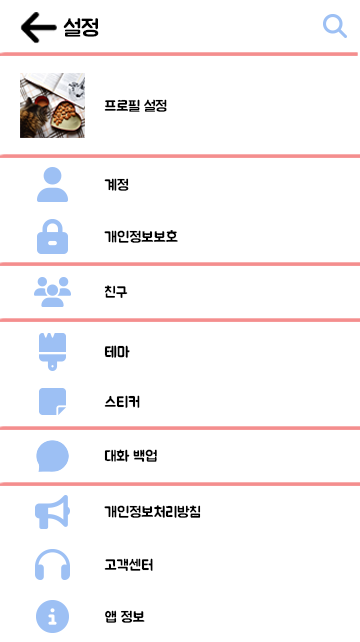
<style>
.page{position:relative;width:360px;height:642px;background:#ffffff}
.page>*{position:absolute;margin:0}
.t1{font:23px "BMJUA";color:#000000}
.t2{font:15px "BMJUA";color:#000000}
</style>
<div class="page">
<p class="t1" style="left:63px;top:18px;width:36px;height:19px">설정</p>
<p class="t2" style="left:104px;top:99px;width:63px;height:13px">프로필 설정</p>
<p class="t2" style="left:104px;top:178px;width:25px;height:13px">계정</p>
<p class="t2" style="left:104px;top:230px;width:74px;height:13px">개인정보보호</p>
<p class="t2" style="left:104px;top:285px;width:24px;height:13px">친구</p>
<p class="t2" style="left:104px;top:345px;width:26px;height:13px">테마</p>
<p class="t2" style="left:104px;top:395px;width:36px;height:13px">스티커</p>
<p class="t2" style="left:104px;top:449px;width:53px;height:13px">대화 백업</p>
<p class="t2" style="left:104px;top:505px;width:97px;height:13px">개인정보처리방침</p>
<p class="t2" style="left:104px;top:558px;width:49px;height:13px">고객센터</p>
<p class="t2" style="left:105px;top:610px;width:40px;height:13px">앱 정보</p>
</div>
